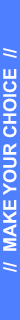
<style>
.page{position:relative;width:20px;height:320px;background:#4d7fff}
.page>*{position:absolute;margin:0}
.t1{font:18px "Arial-BoldMT";color:#ffffff}
</style>
<div class="page">
<p class="t1" style="left:3px;top:48px;width:14px;height:224px;rotate:-90deg">//  MAKE YOUR CHOICE  //</p>
</div>
